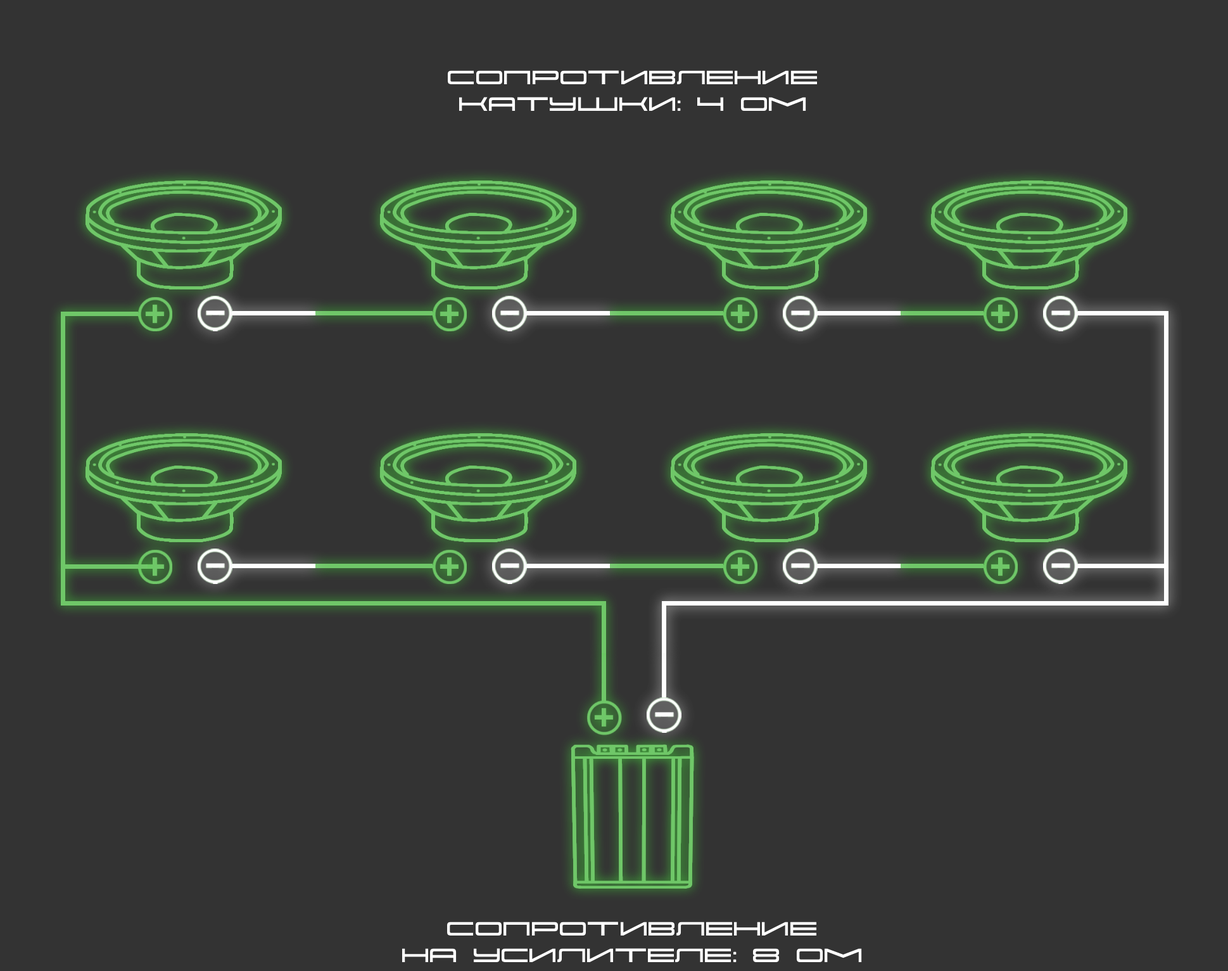
<style>
.page{position:relative;width:1228px;height:971px;background:#333333}
.page>*{position:absolute;margin:0}
.t1{font:22.2px "SK-Porsche";color:#ffffff}
</style>
<div class="page">
<p class="t1" style="left:448px;top:70px;width:370px;height:41px;text-align:center">Сопротивление<br>катушки: 4 ОМ</p>
<p class="t1" style="left:402px;top:922px;width:460px;height:41px;text-align:center">Сопротивление<br>на усилителе: 8 ОМ</p>
</div>
